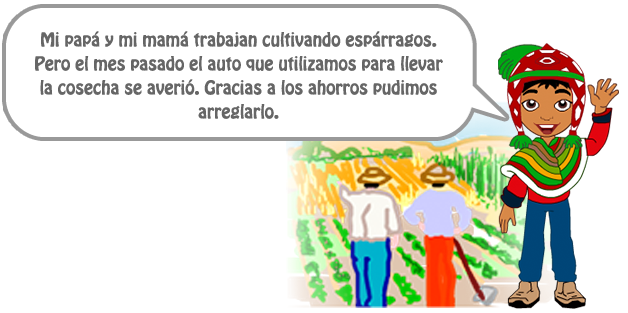
<style>
.page{position:relative;width:628px;height:313px;background:#ffffff}
.page>*{position:absolute;margin:0}
.t1{font:17px/24px "HoboStd";color:#666666}
</style>
<div class="page">
<p class="t1" style="left:35px;top:31px;width:408px;height:88px;text-align:center">Mi papá y mi mamá trabajan cultivando espárragos.<br>Pero el mes pasado el auto que utilizamos para llevar<br>la cosecha se averió. Gracias a los ahorros pudimos<br>arreglarlo.</p>
</div>
